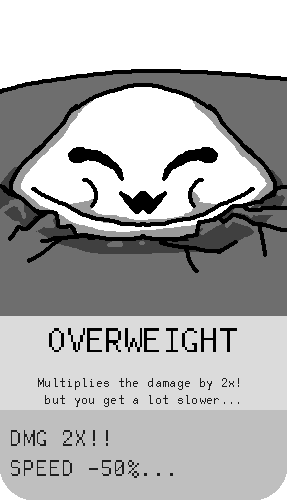
<style>
.page{position:relative;width:287px;height:500px;background:#ffffff}
.page>*{position:absolute;margin:0}
.t1{font:37.5px "FreePixel-Regular";color:#000000}
.t2{font:14.1px "FreePixel-Regular";color:#1e1e1e}
.t3{font:25px "FreePixel-Regular";color:#1e1e1e}
</style>
<div class="page">
<p class="t1" style="left:49px;top:328px;width:188px;height:24px">OVERWEIGHT</p>
<p class="t2" style="left:38px;top:378px;width:201px;height:29px;text-align:center">Multiplies the damage by 2x! <br>but you get a lot slower...</p>
<p class="t3" style="left:11px;top:430px;width:162px;height:48px">DMG 2X!!<br>SPEED -50%...</p>
</div>
